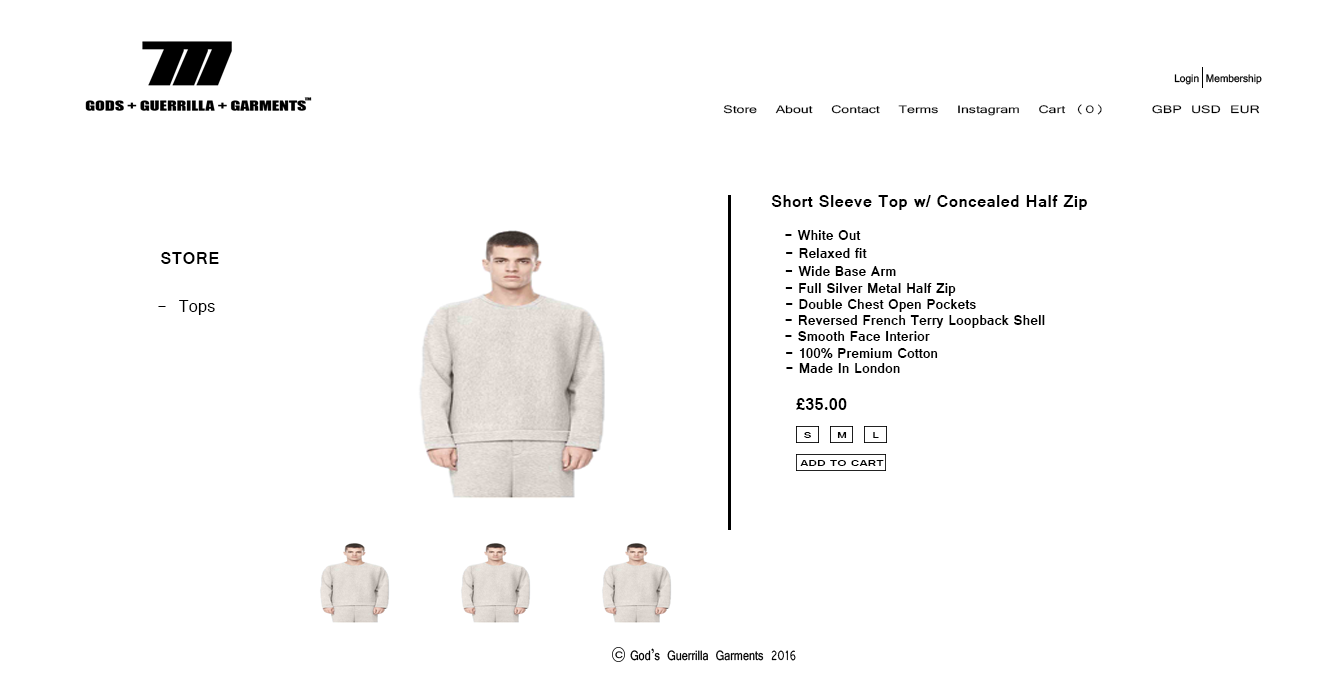
<style>
.page{position:relative;width:1332px;height:683px;background:#ffffff}
.page>*{position:absolute;margin:0}
.t1{font:11.7px "Vrinda";color:#000000;scale:1.35 1}
.t2{font:18.5px "Vrinda-Bold";color:#000000}
.t3{font:14.8px "Vrinda-Bold";color:#000000}
.t4{font:18.5px "Vrinda";color:#000000}
.t5{font:9.9px "Vrinda-Bold";color:#000000;scale:1.31 1}
</style>
<div class="page">
<p class="t1" style="left:723px;top:104px;width:537px;height:12px">Store  About  Contact  Terms  Instagram  Cart (0)     GBP USD EUR</p>
<p class="t2" style="left:771px;top:195px;width:316px;height:15px">Short Sleeve Top w/ Concealed Half Zip</p>
<p class="t3" style="left:785px;top:230px;width:76px;height:10px"><span class="t2"><br> </span>- White Out</p>
<p class="t2" style="left:161px;top:252px;width:58px;height:12px">STORE</p>
<p class="t3" style="left:786px;top:248px;width:81px;height:10px"><span class="t2"><br> </span>- Relaxed fit</p>
<p class="t3" style="left:785px;top:266px;width:111px;height:10px">- Wide Base Arm</p>
<p class="t3" style="left:785px;top:283px;width:171px;height:13px">- Full Silver Metal Half Zip</p>
<p class="t4" style="left:158px;top:300px;width:57px;height:15px">- Tops</p>
<p class="t3" style="left:786px;top:299px;width:190px;height:13px">- Double Chest Open Pockets</p>
<p class="t3" style="left:785px;top:315px;width:260px;height:13px">- Reversed French Terry Loopback Shell</p>
<p class="t3" style="left:785px;top:331px;width:145px;height:10px">- Smooth Face Interior</p>
<p class="t3" style="left:786px;top:348px;width:152px;height:10px">- 100% Premium Cotton</p>
<p class="t3" style="left:786px;top:363px;width:114px;height:10px">- Made In London</p>
<p class="t2" style="left:796px;top:398px;width:51px;height:12px">£35.00</p>
<p class="t5" style="left:804px;top:432px;width:7px;height:6px">S</p>
<p class="t5" style="left:837px;top:432px;width:10px;height:6px">M</p>
<p class="t5" style="left:873px;top:432px;width:6px;height:6px">L</p>
<p class="t5" style="left:800px;top:460px;width:84px;height:6px">ADD TO CART</p>
</div>
